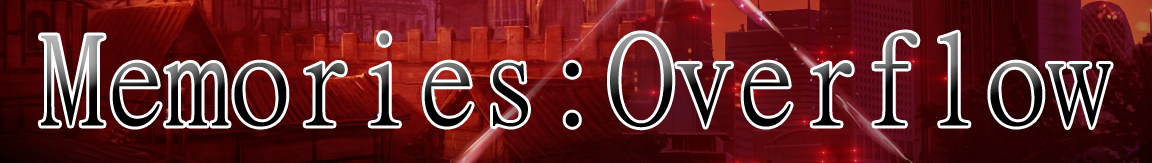
<style>
.page{position:relative;width:1152px;height:163px}
.page>*{position:absolute;margin:0}
.t1{font:125px "MingLiU-ExtB";color:#000000}
</style>
<div class="page">
<p class="t1" style="left:40px;top:33px;width:539px;height:94px">Memories:</p>
<p class="t1" style="left:610px;top:32px;width:501px;height:96px">Overflow</p>
</div>
